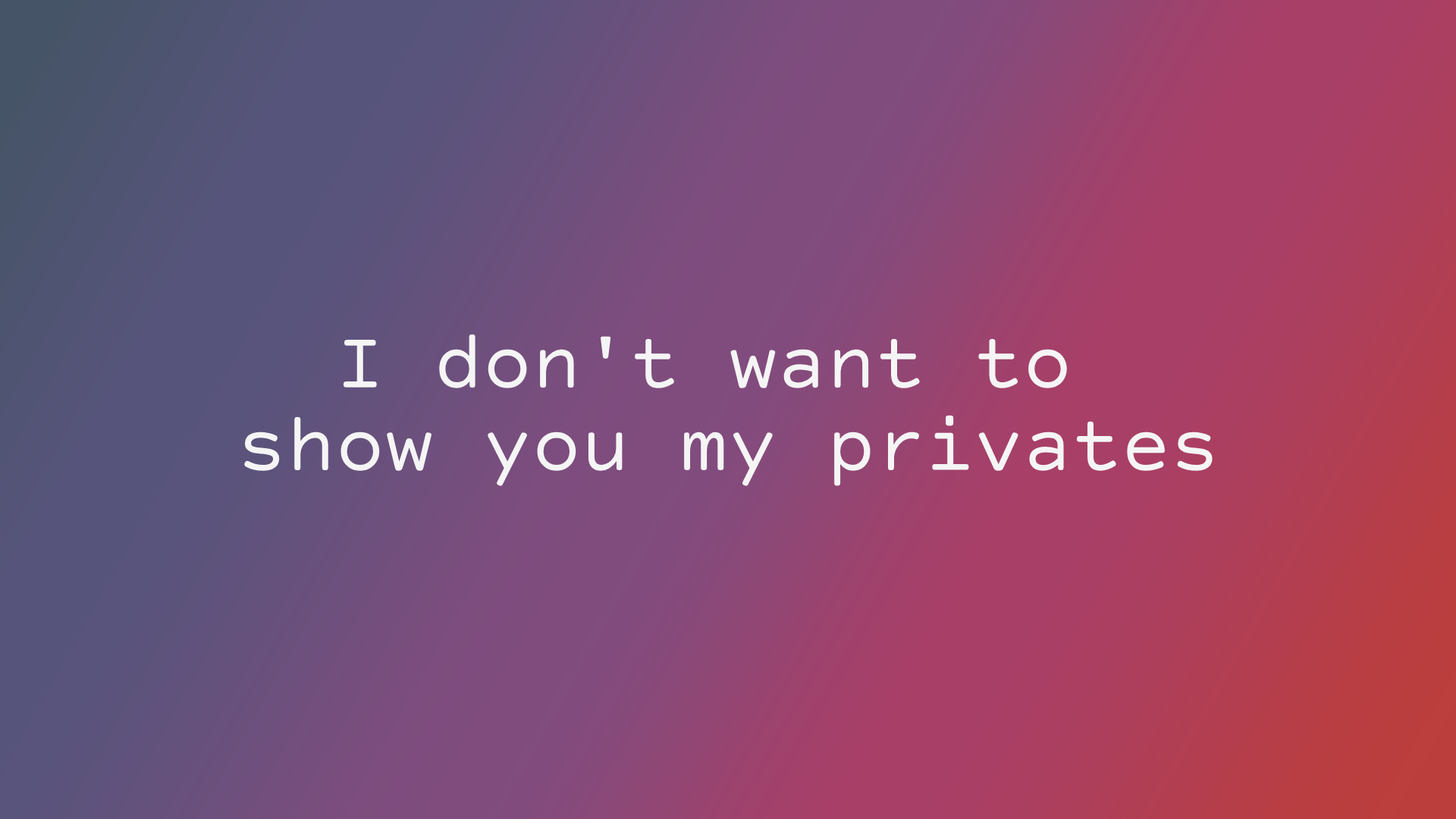
<style>
.page{position:relative;width:1456px;height:819px}
.page>*{position:absolute;margin:0}
.t1{font:81.9px "CourierPrimeCode-Regular";color:#f5f5f5}
</style>
<div class="page">
<p class="t1" style="left:244px;top:334px;width:969px;height:152px;text-align:center">I don't want to <br>show you my privates</p>
</div>
